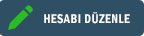
<style>
.page{position:relative;width:144px;height:36px;background:#2f4f64}
.page>*{position:absolute;margin:0}
.t1{font:12.9px "FranklinGothic-DemiCond";letter-spacing:0.04em;color:#ffffff;scale:0.93 1}
</style>
<div class="page">
<p class="t1" style="left:44px;top:12px;width:86px;height:12px">HESABI DÜZENLE</p>
</div>
